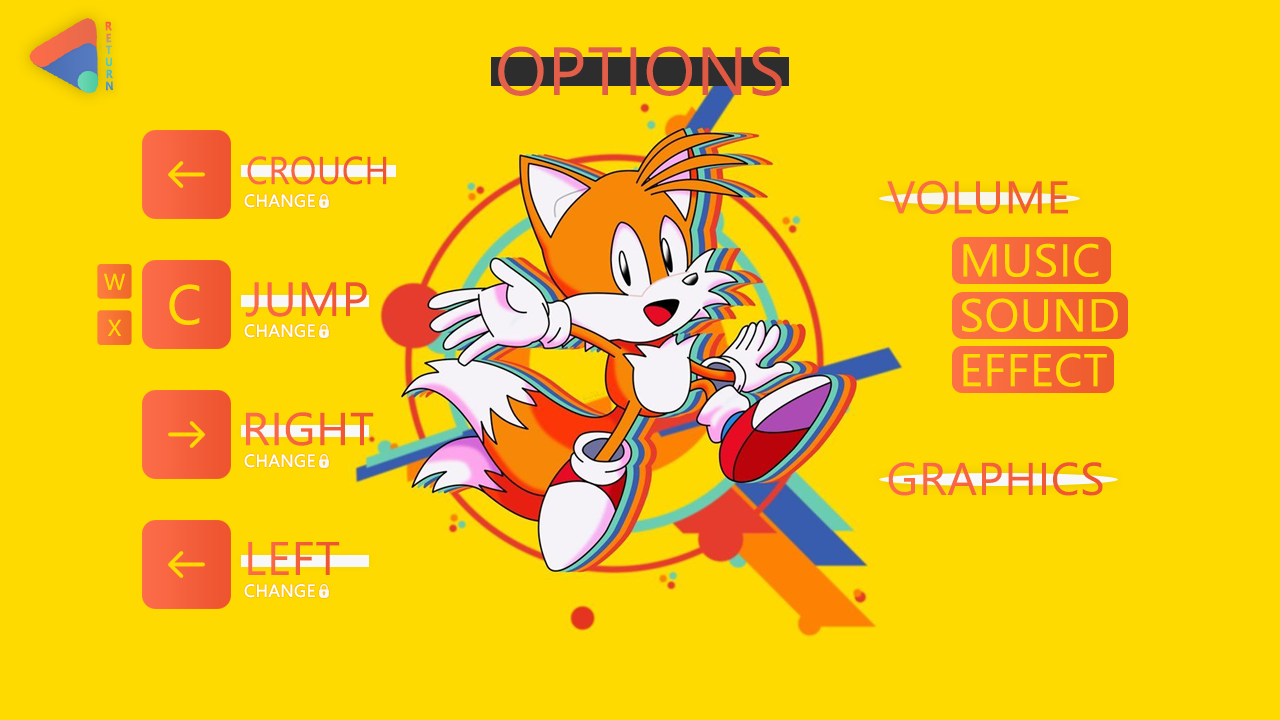
<style>
.page{position:relative;width:1280px;height:720px;background:#feda00}
.page>*{position:absolute;margin:0}
.t1{font:12.1px/11.9px "SegoeUI-Bold";letter-spacing:0.02em;scale:0.86 1}
.t2{font:68px "SegoeUI";letter-spacing:0.02em;color:#e05c46}
.t3{font:38.9px "SegoeUI";letter-spacing:0.02em;color:#f5613d;scale:0.9 1}
.t4{font:45.7px "SegoeUI";letter-spacing:0.02em;color:#f56538}
.t5{font:17.4px "SegoeUI";letter-spacing:0.02em;color:#ffffff}
.t6{font:45.7px "SegoeUI";letter-spacing:0.02em;color:#feda00}
.t7{font:23px "SegoeUI";letter-spacing:0.02em;color:#feda00}
.t8{font:55.5px "SegoeUI";letter-spacing:0.02em;color:#feda00}
.t9{font:48px "SegoeUI";letter-spacing:0.02em;color:#f45e3a}
.t10{font:46px "SegoeUI";letter-spacing:0.02em;color:#f5613d}
.t11{font:45.7px "SegoeUI";letter-spacing:0.02em;color:#f5613d}
.t12{font:46.8px "SegoeUI";letter-spacing:0.02em;color:#f45f3b}
</style>
<div class="page">
<p class="t1" style="left:105px;top:21px;width:8px;height:70px;text-align:center;rotate:-1deg">R<br>E<br>T<br>U<br>R<br>N</p>
<p class="t2" style="left:498px;top:46px;width:284px;height:50px">OPTIONS</p>
<p class="t3" style="left:247px;top:156px;width:140px;height:29px">CROUCH</p>
<p class="t4" style="left:887px;top:180px;width:181px;height:34px">VOLUME</p>
<p class="t5" style="left:244px;top:194px;width:71px;height:14px">CHANGE</p>
<p class="t6" style="left:962px;top:243px;width:156px;height:144px">MUSIC<br>SOUND<br>EFFECT</p>
<p class="t7" style="left:104px;top:273px;width:21px;height:17px">W</p>
<p class="t8" style="left:169px;top:284px;width:31px;height:41px">C</p>
<p class="t9" style="left:245px;top:282px;width:122px;height:35px">JUMP</p>
<p class="t7" style="left:108px;top:319px;width:13px;height:17px">X</p>
<p class="t5" style="left:244px;top:324px;width:71px;height:14px">CHANGE</p>
<p class="t10" style="left:246px;top:412px;width:128px;height:34px">RIGHT</p>
<p class="t5" style="left:244px;top:454px;width:71px;height:14px">CHANGE</p>
<p class="t11" style="left:888px;top:462px;width:215px;height:34px">GRAPHICS</p>
<p class="t12" style="left:248px;top:542px;width:92px;height:33px">LEFT</p>
<p class="t5" style="left:244px;top:584px;width:71px;height:14px">CHANGE</p>
</div>
